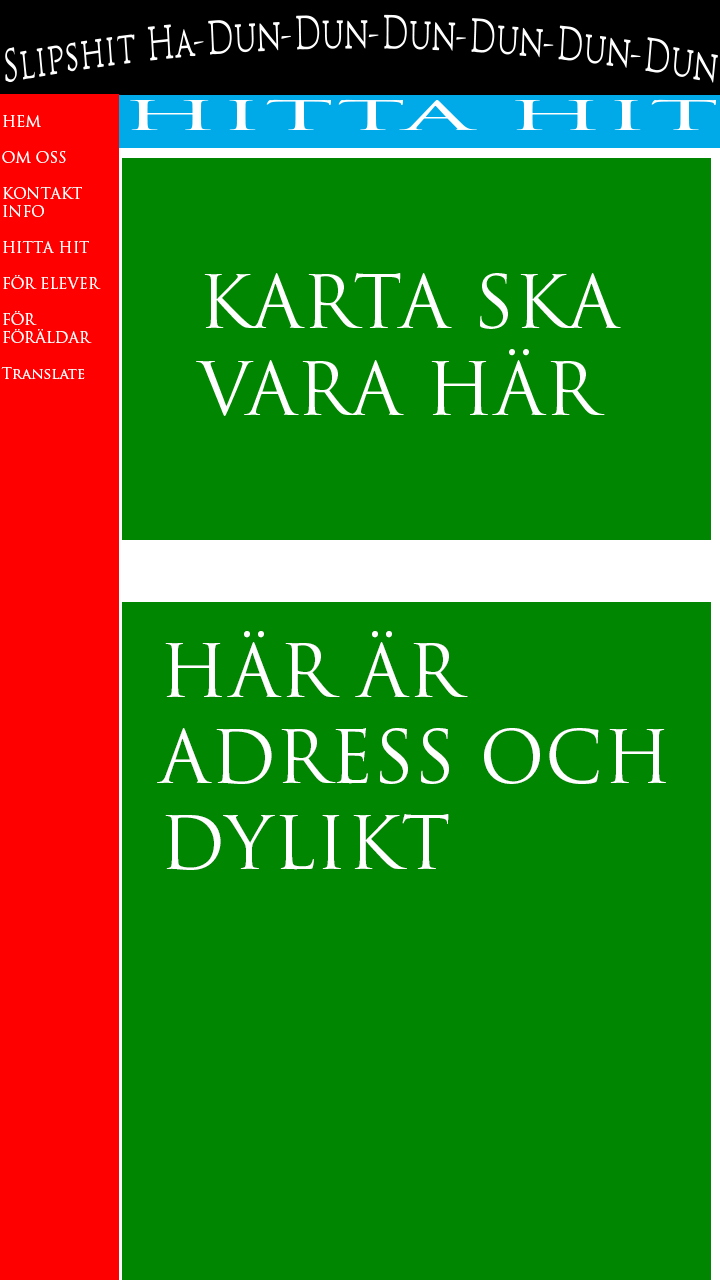
<style>
.page{position:relative;width:720px;height:1280px;background:#008600}
.page>*{position:absolute;margin:0}
.t1{font:15px "TrajanPro-Regular";color:#ffffff}
.t2{font:72px "TrajanPro-Regular";color:#ffffff}
</style>
<div class="page">
<p class="t1" style="left:1px;top:115px;width:100px;height:264px">HEM<br><br>OM OSS<br><br>KONTAKT<br>INFO<br><br>HITTA HIT<br><br>FÖR ELEVER<br><br>FÖR <br>FÖRÄLDAR<br><br>Translate</p>
<p class="t2" style="left:157px;top:631px;width:509px;height:239px">HÄR ÄR<br>ADRESS OCH <br>DYLIKT</p>
</div>
